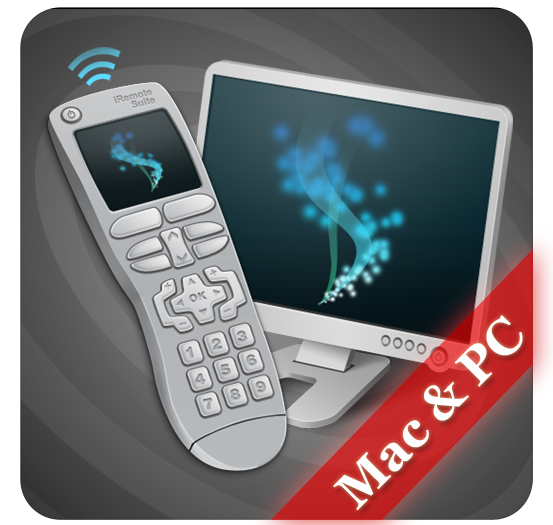
<style>
.page{position:relative;width:553px;height:525px}
.page>*{position:absolute;margin:0}
.t1{font:50px "Georgia-Bold";color:#ffffff}
</style>
<div class="page">
<p class="t1" style="left:333px;top:315px;width:190px;height:196px;rotate:-45deg">Mac &amp; PC</p>
</div>
